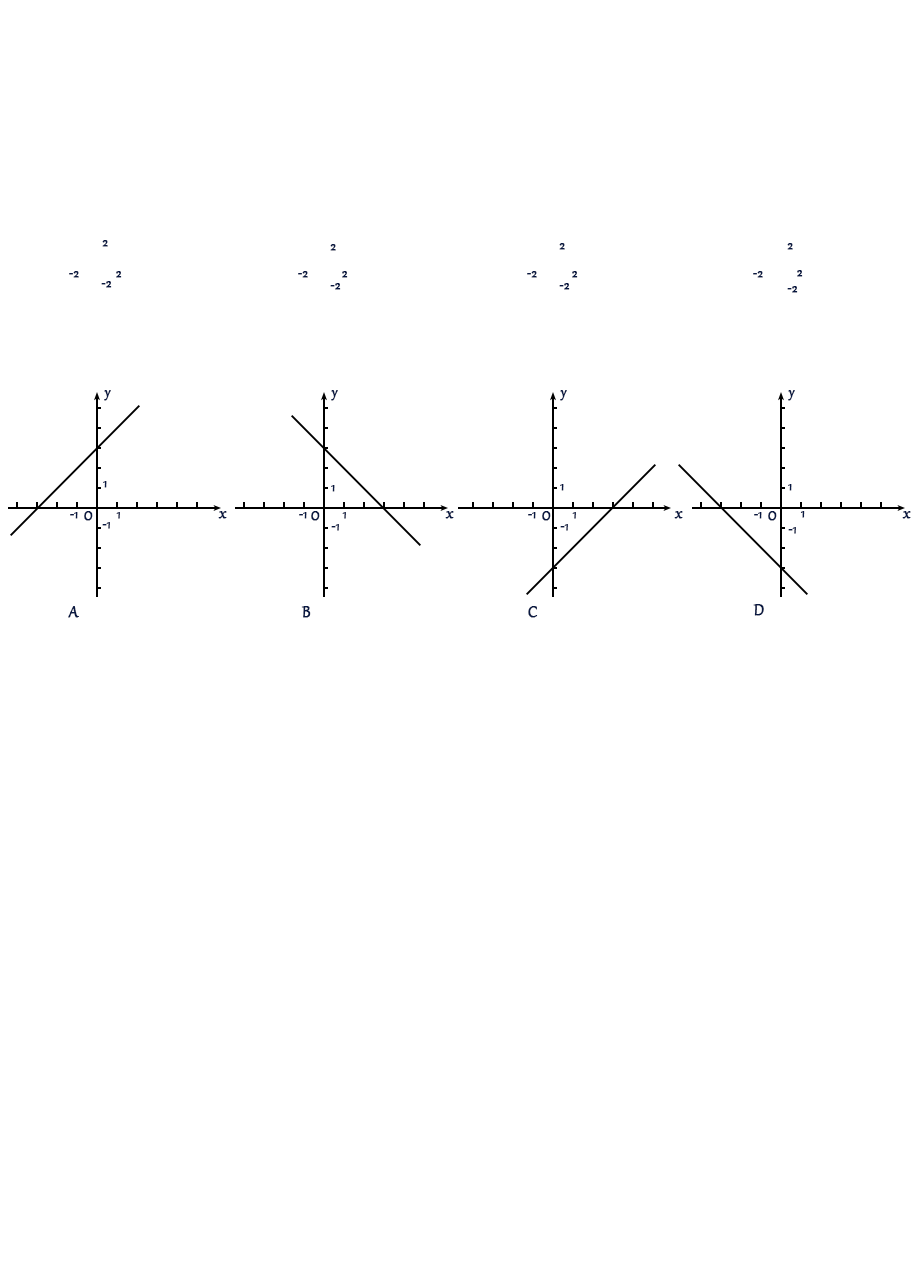
<style>
.page{position:relative;width:916px;height:1268px;background:#ffffff}
.page>*{position:absolute;margin:0}
.t1{font:12px "Gabriola";color:#081842;font-weight:bold}
.t2{font:16px "Gabriola";color:#081842;font-weight:bold}
.t3{font:12px "Gabriola";font-weight:bold}
.t4{font:18.7px "Gabriola";color:#081842;font-weight:bold}
</style>
<div class="page">
<p class="t1" style="left:102px;top:240px;width:6px;height:7px">2</p>
<p class="t1" style="left:330px;top:244px;width:6px;height:7px">2</p>
<p class="t1" style="left:559px;top:243px;width:6px;height:7px">2</p>
<p class="t1" style="left:787px;top:243px;width:6px;height:7px">2</p>
<p class="t1" style="left:797px;top:270px;width:6px;height:7px">2</p>
<p class="t1" style="left:69px;top:271px;width:10px;height:7px">-2</p>
<p class="t1" style="left:101px;top:281px;width:11px;height:7px">-2</p>
<p class="t1" style="left:116px;top:271px;width:6px;height:7px">2</p>
<p class="t1" style="left:298px;top:271px;width:10px;height:7px">-2</p>
<p class="t1" style="left:342px;top:271px;width:6px;height:7px">2</p>
<p class="t1" style="left:527px;top:271px;width:10px;height:7px">-2</p>
<p class="t1" style="left:572px;top:271px;width:6px;height:7px">2</p>
<p class="t1" style="left:753px;top:271px;width:10px;height:7px">-2</p>
<p class="t1" style="left:330px;top:283px;width:11px;height:7px">-2</p>
<p class="t1" style="left:559px;top:283px;width:11px;height:7px">-2</p>
<p class="t1" style="left:787px;top:286px;width:11px;height:7px">-2</p>
<p class="t2" style="left:104px;top:390px;width:7px;height:11px">y</p>
<p class="t2" style="left:331px;top:390px;width:7px;height:11px">y</p>
<p class="t2" style="left:560px;top:390px;width:7px;height:11px">y</p>
<p class="t2" style="left:788px;top:390px;width:7px;height:11px">y</p>
<p class="t1" style="left:103px;top:481px;width:4px;height:7px">1</p>
<p class="t1" style="left:331px;top:485px;width:4px;height:7px">1</p>
<p class="t1" style="left:560px;top:484px;width:4px;height:7px">1</p>
<p class="t1" style="left:788px;top:484px;width:4px;height:7px">1</p>
<p class="t1" style="left:70px;top:512px;width:8px;height:7px">-1</p>
<p class="t2" style="left:84px;top:511px;width:9px;height:10px">O</p>
<p class="t3" style="left:116px;top:512px;width:4px;height:7px">1</p>
<p class="t4" style="left:218px;top:511px;width:9px;height:8px">x</p>
<p class="t1" style="left:299px;top:512px;width:8px;height:7px">-1</p>
<p class="t2" style="left:311px;top:511px;width:9px;height:10px">O</p>
<p class="t3" style="left:342px;top:512px;width:4px;height:7px">1</p>
<p class="t4" style="left:445px;top:511px;width:9px;height:8px">x</p>
<p class="t1" style="left:528px;top:512px;width:8px;height:7px">-1</p>
<p class="t2" style="left:542px;top:511px;width:9px;height:10px">O</p>
<p class="t3" style="left:572px;top:512px;width:4px;height:7px">1</p>
<p class="t4" style="left:674px;top:511px;width:9px;height:8px">x</p>
<p class="t1" style="left:754px;top:512px;width:8px;height:7px">-1</p>
<p class="t2" style="left:768px;top:511px;width:9px;height:10px">O</p>
<p class="t1" style="left:800px;top:511px;width:5px;height:7px">1</p>
<p class="t4" style="left:902px;top:511px;width:9px;height:8px">x</p>
<p class="t1" style="left:102px;top:522px;width:8px;height:7px">-1</p>
<p class="t1" style="left:331px;top:524px;width:8px;height:7px">-1</p>
<p class="t1" style="left:560px;top:524px;width:8px;height:7px">-1</p>
<p class="t1" style="left:788px;top:527px;width:8px;height:7px">-1</p>
<p class="t4" style="left:68px;top:606px;width:11px;height:12px">A</p>
<p class="t4" style="left:301px;top:606px;width:10px;height:12px">B</p>
<p class="t4" style="left:528px;top:606px;width:10px;height:12px">C</p>
<p class="t4" style="left:753px;top:604px;width:11px;height:12px">D</p>
</div>
